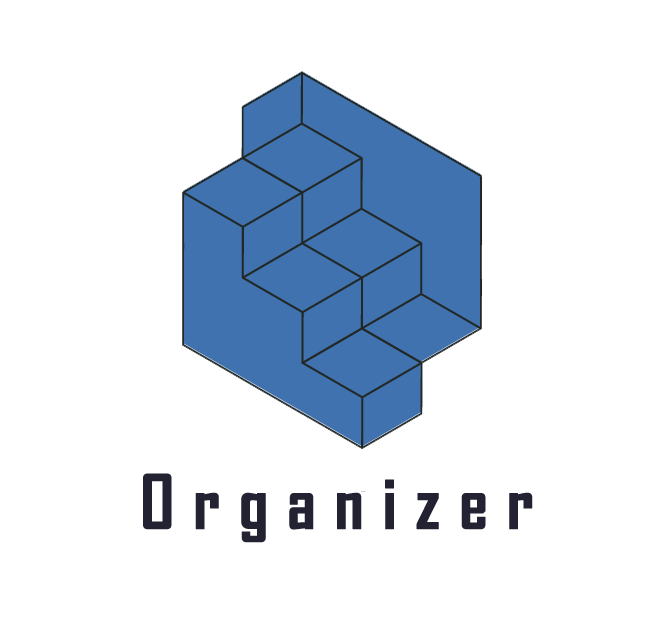
<style>
.page{position:relative;width:667px;height:640px;background:#ffffff}
.page>*{position:absolute;margin:0}
.t1{font:72px "AgencyFB-Bold";color:#222233;font-weight:bold}
</style>
<div class="page">
<p class="t1" style="left:143px;top:473px;width:390px;height:70px">O r g a n i z e r</p>
</div>
